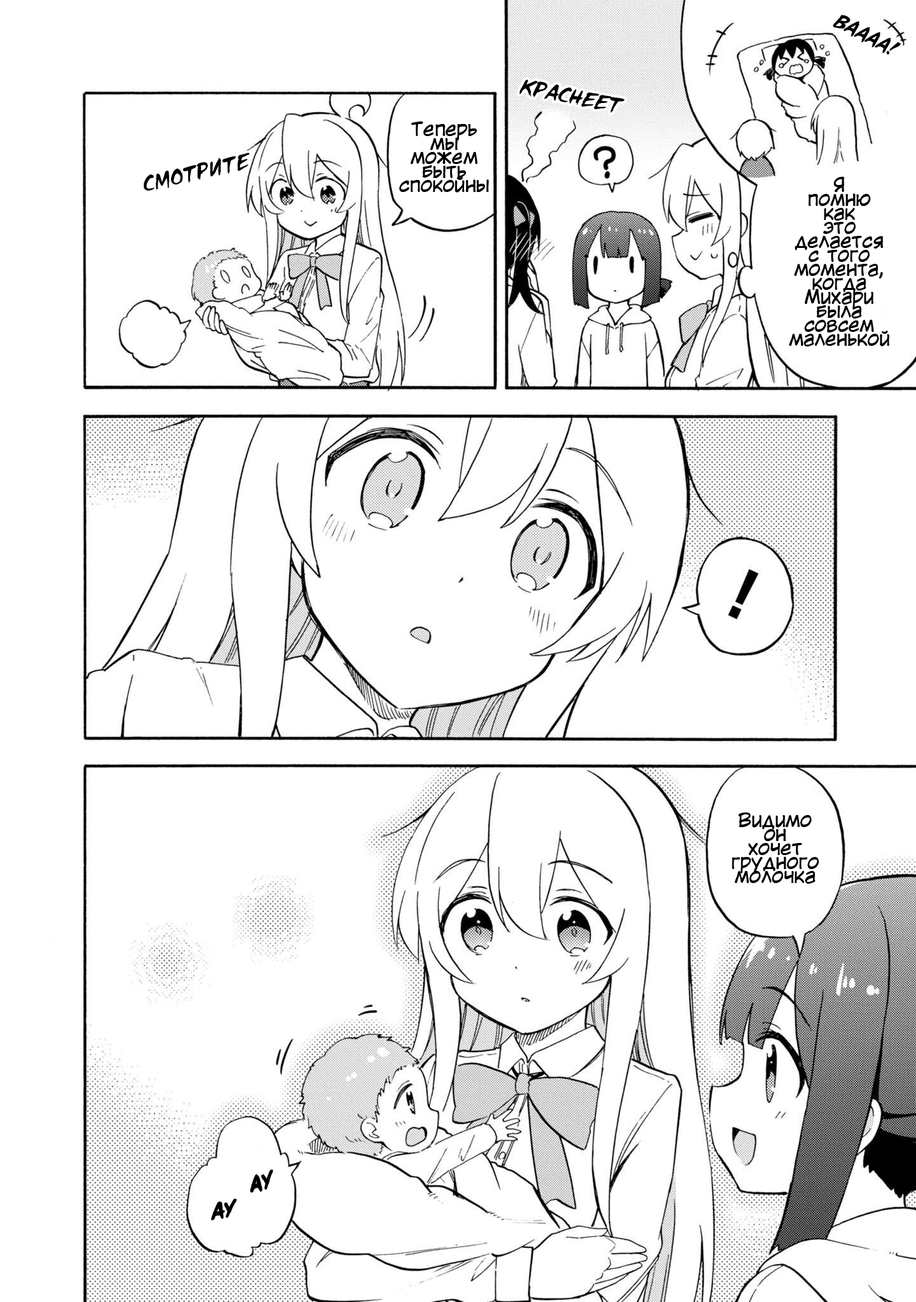
<style>
.page{position:relative;width:916px;height:1302px;background:#ffffff}
.page>*{position:absolute;margin:0}
.t1{font:19.1px "d_CCTimSaleBrush-Italic";color:#000000}
.t2{font:19.1px/14px "KuraiVoice2";color:#000000}
</style>
<div class="page">
<p class="t1" style="left:833px;top:15px;width:68px;height:40px;rotate:27deg">ВАААА!</p>
<p class="t1" style="left:519px;top:79px;width:106px;height:34px;rotate:11deg">Краснеет</p>
<p class="t2" style="left:399px;top:121px;width:90px;height:72px;text-align:center">Теперь<br>мы<br>можем<br>быть<br>спокойны</p>
<p class="t1" style="left:144px;top:153px;width:106px;height:38px;rotate:-13deg">смотрите</p>
<p class="t2" style="left:789px;top:177px;width:100px;height:169px;text-align:center">Я<br>помню<br>как<br>это<br>делается<br>с того<br>момента,<br>когда<br>Михари<br>была<br>совсем<br>маленькой</p>
<p class="t2" style="left:732px;top:812px;width:87px;height:72px;text-align:center">Видимо<br>он<br>хочет<br>грудного<br>молочка</p>
<p class="t1" style="left:250px;top:1170px;width:23px;height:22px;rotate:-16deg">Ау</p>
<p class="t1" style="left:212px;top:1199px;width:24px;height:21px;rotate:-8deg">ау</p>
</div>
